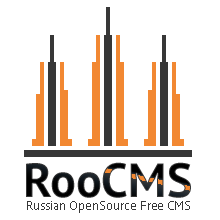
<style>
.page{position:relative;width:220px;height:220px;background:#ffffff}
.page>*{position:absolute;margin:0}
.t1{font:48px "PTSans-Bold"}
.t2{font:13px "PTSans-Regular";color:#373737}
</style>
<div class="page">
<p class="t1" style="left:26px;top:162px;width:165px;height:36px">RooCMS</p>
<p class="t2" style="left:27px;top:201px;width:163px;height:12px">Russian OpenSource Free CMS</p>
</div>
